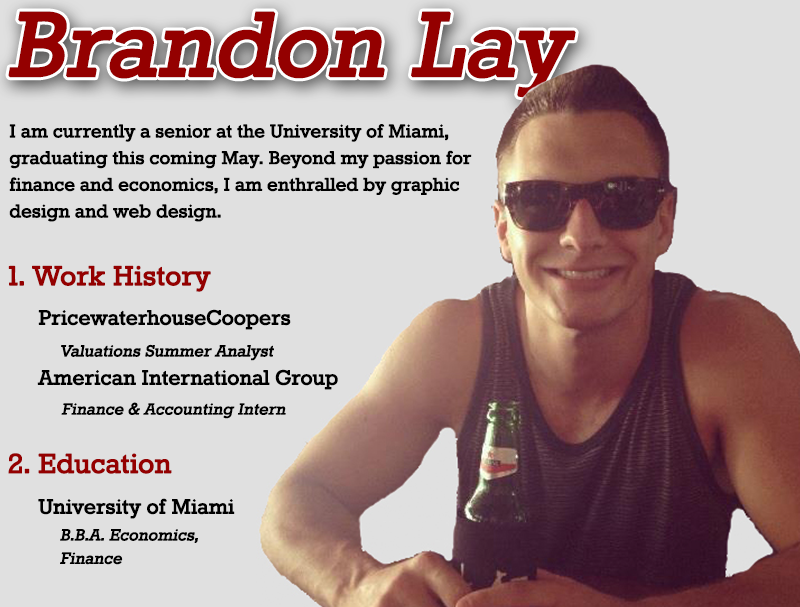
<style>
.page{position:relative;width:800px;height:607px;background:#e0e0e0}
.page>*{position:absolute;margin:0}
.t1{font:111.1px "Rokkitt";color:#940000;font-weight:bold;font-style:italic}
.t2{font:22.2px "Rokkitt";color:#000000;font-weight:bold}
.t3{font:33.3px "Rokkitt";color:#940000;font-weight:bold}
.t4{font:25px "Rokkitt";color:#000000;font-weight:bold}
.t5{font:19.4px "Rokkitt";color:#000000;font-weight:bold;font-style:italic}
</style>
<div class="page">
<p class="t1" style="left:8px;top:11px;width:568px;height:87px">Brandon Lay</p>
<p class="t2" style="left:9px;top:124px;width:463px;height:98px">I am currently a senior at the University of Miami, <br>graduating this coming May. Beyond my passion for <br>finance and economics, I am enthralled by graphic <br>design and web design.</p>
<p class="t3" style="left:8px;top:265px;width:203px;height:27px">1. Work History</p>
<p class="t4" style="left:37px;top:309px;width:301px;height:81px">PricewaterhouseCoopers<br><br>American International Group</p>
<p class="t5" style="left:61px;top:344px;width:213px;height:17px">Valuations Summer Analyst</p>
<p class="t5" style="left:61px;top:402px;width:225px;height:17px">Finance &amp; Accounting Intern</p>
<p class="t3" style="left:8px;top:453px;width:164px;height:21px">2. Education</p>
<p class="t4" style="left:38px;top:498px;width:197px;height:21px">University of Miami</p>
<p class="t5" style="left:60px;top:529px;width:138px;height:36px">B.B.A. Economics,<br>Finance</p>
</div>
